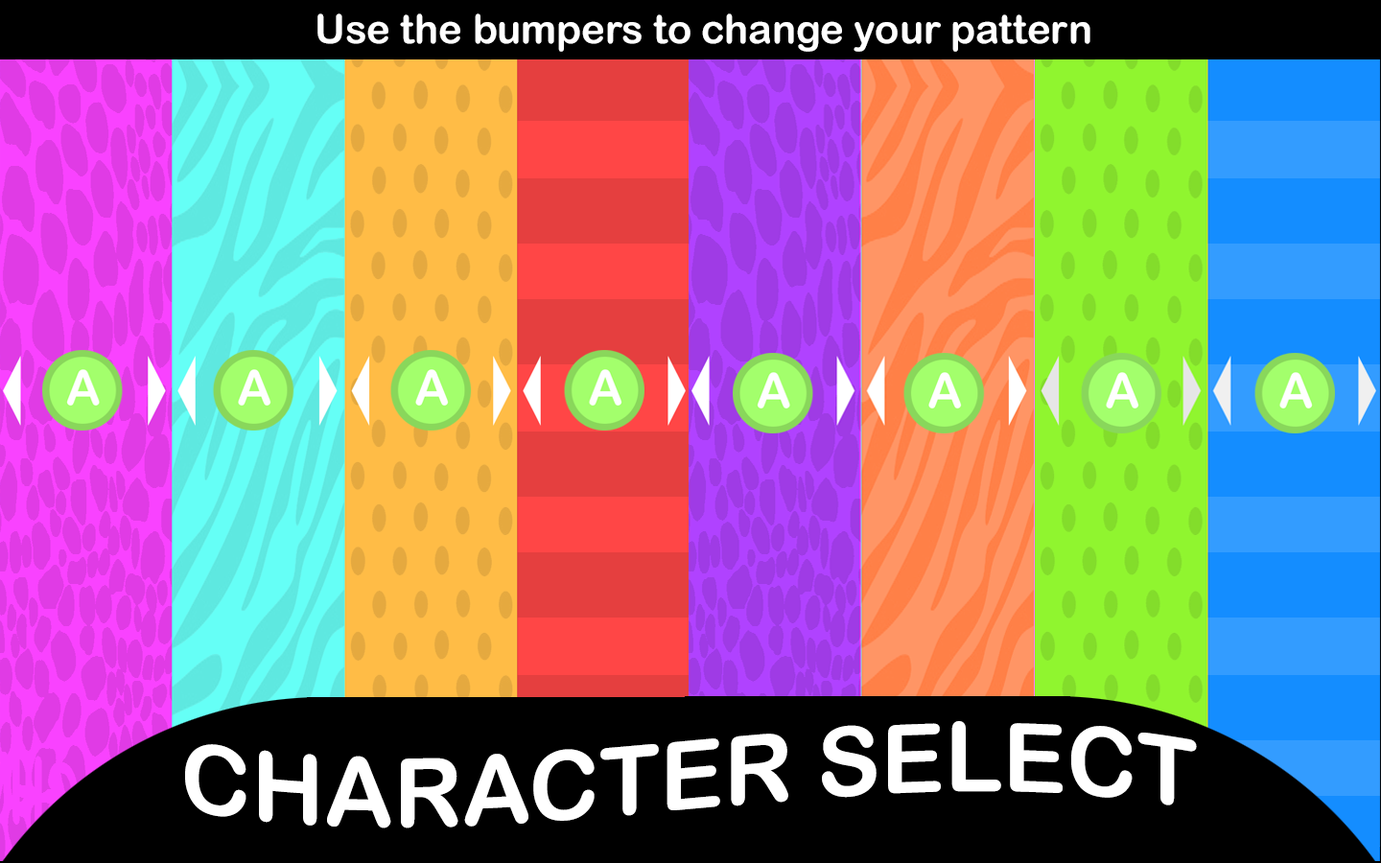
<style>
.page{position:relative;width:1381px;height:863px}
.page>*{position:absolute;margin:0}
.t1{font:40px "ArialRoundedMTBold";color:#ffffff}
.t2{font:95.9px "ArialRoundedMTBold";color:#ffffff}
</style>
<div class="page">
<p class="t1" style="left:317px;top:13px;width:774px;height:39px">Use the bumpers to change your pattern</p>
<p class="t2" style="left:185px;top:721px;width:1012px;height:108px">CHARACTER SELECT</p>
</div>
